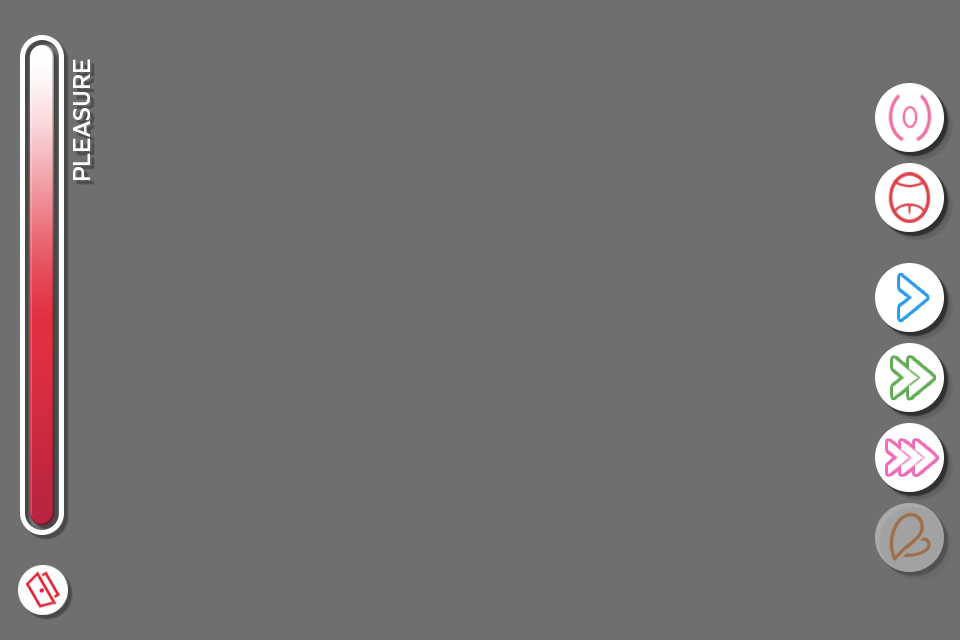
<style>
.page{position:relative;width:960px;height:640px;background:#6f6f6f}
.page>*{position:absolute;margin:0}
.t1{font:25px "QuietSans-SemiBold";color:#ffffff}
</style>
<div class="page">
<p class="t1" style="left:73px;top:59px;width:17px;height:121px;rotate:-90deg">PLEASURE</p>
</div>
